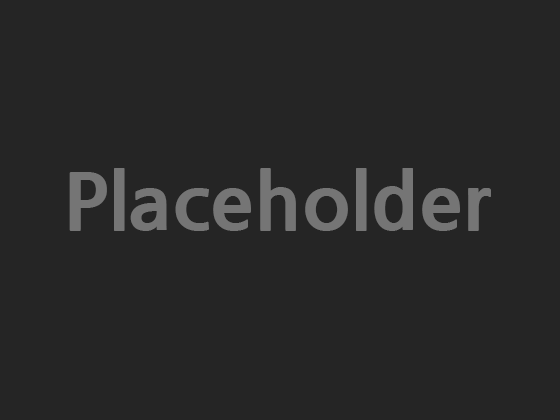
<style>
.page{position:relative;width:560px;height:420px;background:#252525}
.page>*{position:absolute;margin:0}
.t1{font:80px "NanumGothicExtraBold";color:#757575}
</style>
<div class="page">
<p class="t1" style="left:69px;top:168px;width:422px;height:63px">Placeholder</p>
</div>
